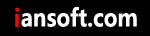
<style>
.page{position:relative;width:150px;height:36px;background:#000000}
.page>*{position:absolute;margin:0}
.t1{font:24px "MicrosoftYaHei-Bold";color:#ffffff;scale:0.87 1}
.t2{font:24px "MicrosoftYaHei-Bold";color:#ff0000;scale:0.87 1}
</style>
<div class="page">
<p class="t1" style="left:21px;top:6px;width:116px;height:21px">ansoft.com</p>
<p class="t2" style="left:15px;top:7px;width:4px;height:20px">i</p>
</div>
